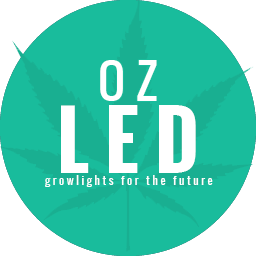
<style>
.page{position:relative;width:256px;height:256px;background:#19bc9c}
.page>*{position:absolute;margin:0}
.t1{font:47px "Oswald-Regular";letter-spacing:0.24em;color:#ffffff}
.t2{font:77px "Oswald-Bold";letter-spacing:0.22em;color:#ffffff}
.t3{font:11px "Oswald-Regular";letter-spacing:0.24em;color:#ffffff}
</style>
<div class="page">
<p class="t1" style="left:100px;top:60px;width:57px;height:41px">OZ</p>
<p class="t2" style="left:61px;top:105px;width:135px;height:68px">LED</p>
<p class="t3" style="left:45px;top:175px;width:168px;height:12px">growlights for the future</p>
</div>
